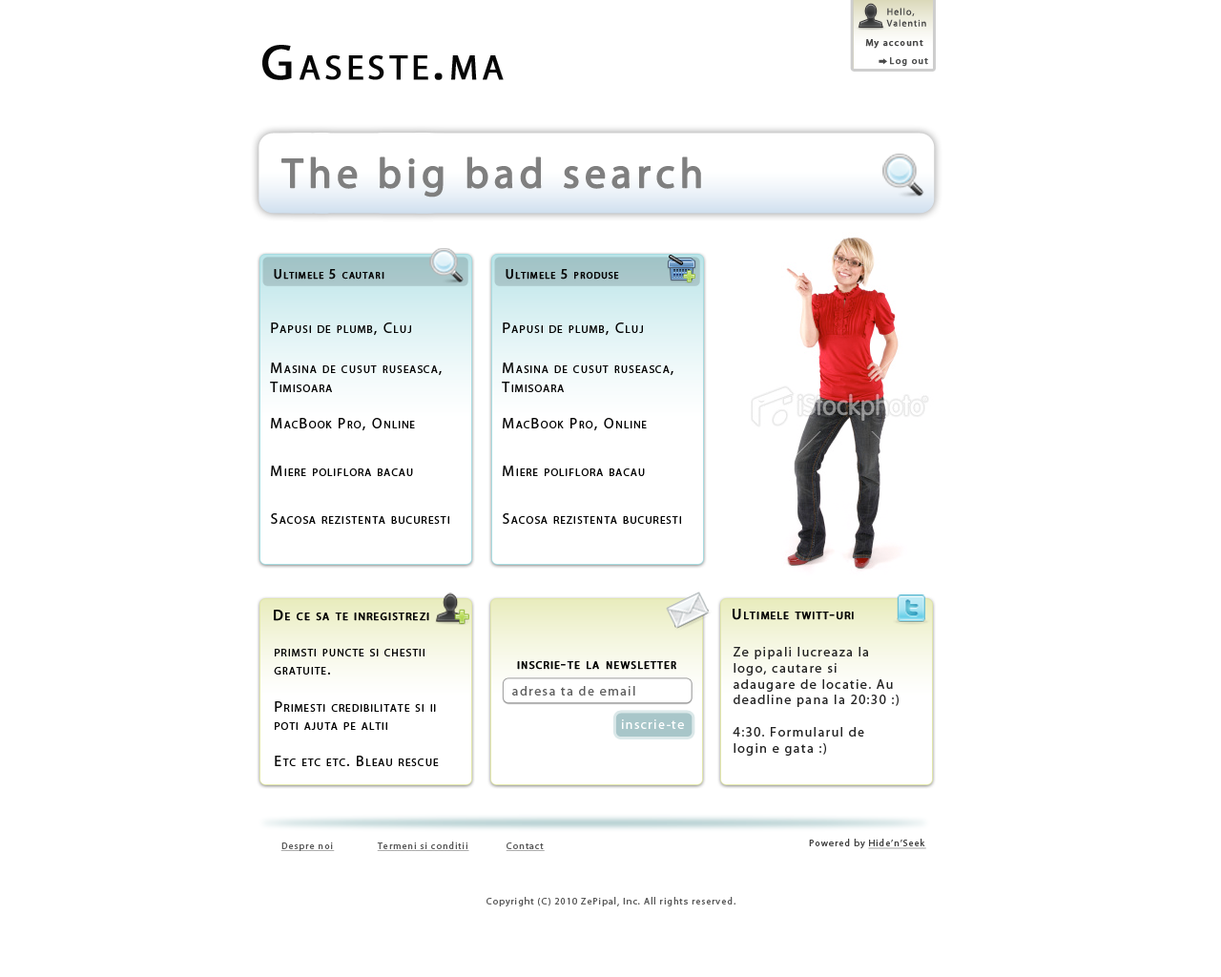
<style>
.page{position:relative;width:1221px;height:977px;background:#ffffff}
.page>*{position:absolute;margin:0}
.t1{font:9.5px "MyriadPro-Regular";letter-spacing:0.1em;color:#474747}
.t2{font:9.5px "MyriadPro-Regular";letter-spacing:0.1em;color:#474747;font-weight:bold}
.t3{font:49.8px "MyriadPro-Regular";letter-spacing:0.1em;color:#060606;font-variant:small-caps;font-weight:bold}
.t4{font:9.5px "MyriadPro-Regular";letter-spacing:0.1em;color:#4e4f4f;font-weight:bold}
.t5{font:42px "MyriadPro-Regular";letter-spacing:0.1em;color:#7f7f7f;font-weight:bold}
.t6{font:13.4px "MyriadPro-Regular";letter-spacing:0.1em;color:#060606;font-variant:small-caps;font-weight:bold}
.t7{font:15.3px "MyriadPro-Regular";letter-spacing:0.1em;color:#060606;font-variant:small-caps}
.t8{font:15.3px "MyriadPro-Regular";letter-spacing:0.1em;color:#060606;font-variant:small-caps;font-weight:bold}
.t9{font:13.4px "MyriadPro-Regular";letter-spacing:0.1em;color:#232323}
.t10{font:13.4px "MyriadPro-Regular";letter-spacing:0.1em;color:#5e5e5e}
.t11{font:13.4px "MyriadPro-Regular";letter-spacing:0.1em;color:#ffffff}
.t12{font:9.5px "MyriadPro-Regular";letter-spacing:0.1em;color:#595959;text-decoration:underline}
.t13{font:9.5px "MyriadPro-Regular";letter-spacing:0.1em;color:#424242;text-decoration:underline}
.t14{font:9.5px "MyriadPro-Regular";letter-spacing:0.1em;color:#424242}
.t15{font:9.5px "MyriadPro-Regular";letter-spacing:0.1em;color:#595959}
</style>
<div class="page">
<p class="t1" style="left:886px;top:8px;width:40px;height:19px">Hello,<br>Valentin</p>
<p class="t2" style="left:865px;top:39px;width:58px;height:10px">My account</p>
<p class="t3" style="left:262px;top:45px;width:242px;height:35px">Gaseste.ma</p>
<p class="t4" style="left:890px;top:57px;width:38px;height:10px">Log out</p>
<p class="t5" style="left:281px;top:156px;width:420px;height:41px">The big bad search</p>
<p class="t6" style="left:274px;top:269px;width:110px;height:10px">Ultimele 5 cautari</p>
<p class="t6" style="left:506px;top:269px;width:113px;height:10px">Ultimele 5 produse</p>
<p class="t7" style="left:271px;top:322px;width:140px;height:14px">Papusi de plumb, Cluj</p>
<p class="t7" style="left:503px;top:322px;width:140px;height:14px">Papusi de plumb, Cluj</p>
<p class="t7" style="left:270px;top:362px;width:172px;height:30px">Masina de cusut ruseasca,<br>Timisoara</p>
<p class="t7" style="left:502px;top:362px;width:171px;height:30px">Masina de cusut ruseasca,<br>Timisoara</p>
<p class="t7" style="left:271px;top:418px;width:144px;height:13px">MacBook Pro, Online</p>
<p class="t7" style="left:503px;top:418px;width:144px;height:13px">MacBook Pro, Online</p>
<p class="t7" style="left:271px;top:465px;width:142px;height:11px">Miere poliflora bacau</p>
<p class="t7" style="left:503px;top:465px;width:142px;height:11px">Miere poliflora bacau</p>
<p class="t7" style="left:271px;top:513px;width:178px;height:11px">Sacosa rezistenta bucuresti</p>
<p class="t7" style="left:503px;top:513px;width:178px;height:11px">Sacosa rezistenta bucuresti</p>
<p class="t8" style="left:274px;top:609px;width:155px;height:12px">De ce sa te inregistrezi</p>
<p class="t8" style="left:733px;top:609px;width:121px;height:11px">Ultimele twitt-uri</p>
<p class="t7" style="left:274px;top:649px;width:165px;height:117px">primsti puncte si chestii gratuite.<br><br>Primesti credibilitate si ii poti ajuta pe altii<br><br>Etc etc etc. Bleau rescue</p>
<p class="t9" style="left:733px;top:647px;width:165px;height:108px">Ze pipali lucreaza la logo, cautare si adaugare de locatie. Au deadline pana la 20:30 :)<br><br>4:30. Formularul de login e gata :)</p>
<p class="t8" style="left:517px;top:661px;width:159px;height:9px">inscrie-te la newsletter</p>
<p class="t10" style="left:512px;top:686px;width:123px;height:9px">adresa ta de email</p>
<p class="t11" style="left:622px;top:719px;width:62px;height:10px">inscrie-te</p>
<p class="t12" style="left:280px;top:842px;width:55px;height:9px">Despre noi</p>
<p class="t12" style="left:377px;top:841px;width:92px;height:10px">Termeni si conditii</p>
<p class="t12" style="left:506px;top:842px;width:39px;height:9px">Contact</p>
<p class="t13" style="left:809px;top:838px;width:117px;height:11px"><span class="t14">Powered by </span>Hide’n’Seek</p>
<p class="t15" style="left:486px;top:897px;width:249px;height:10px">Copyright (C) 2010 ZePipal, Inc. All rights reserved.</p>
</div>
